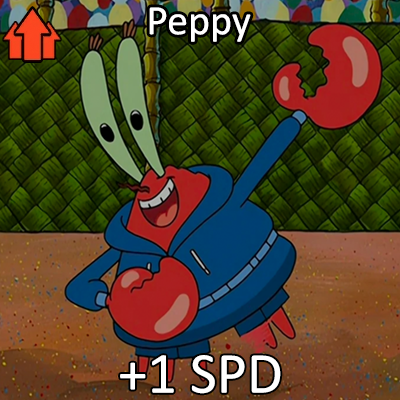
<style>
.page{position:relative;width:400px;height:400px}
.page>*{position:absolute;margin:0}
.t1{font:72px "Calibri";color:#ffffff}
.t2{font:100px "Calibri";color:#ffffff}
</style>
<div class="page">
<p class="t1" style="left:149px;top:7px;width:102px;height:35px">Peppy</p>
<p class="t2" style="left:120px;top:355px;width:161px;height:39px">+1 SPD</p>
</div>
